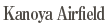
<style>
.page{position:relative;width:106px;height:27px;background:#ffffff}
.page>*{position:absolute;margin:0}
.t1{font:18px "RyuminPro-ExBold";letter-spacing:-0.08em;color:#4c4843;scale:0.85 1}
</style>
<div class="page">
<p class="t1" style="left:3px;top:6px;width:102px;height:17px">Kanoya Airfield</p>
</div>
